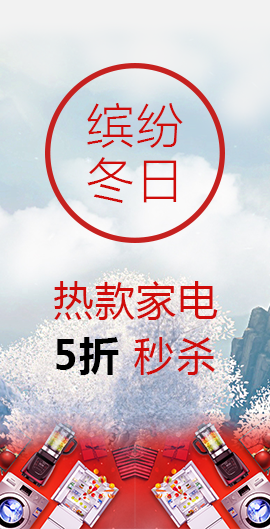
<style>
.page{position:relative;width:270px;height:529px}
.page>*{position:absolute;margin:0}
.t1{font:48px/54.7px "MicrosoftYaHeiLight";letter-spacing:0.04em;color:#cf0c0a}
.t2{font:40px/54.7px "MicrosoftYaHei";letter-spacing:0.04em;color:#cf0c0a}
.t3{font:40px/54.7px "MicrosoftYaHei-Bold";letter-spacing:0.04em;color:#000000}
</style>
<div class="page">
<p class="t1" style="left:87px;top:103px;width:96px;height:100px">缤纷<br>冬日</p>
<p class="t2" style="left:54px;top:281px;width:164px;height:94px">热款家电<br><span class="t3">5折 </span>秒杀</p>
</div>
